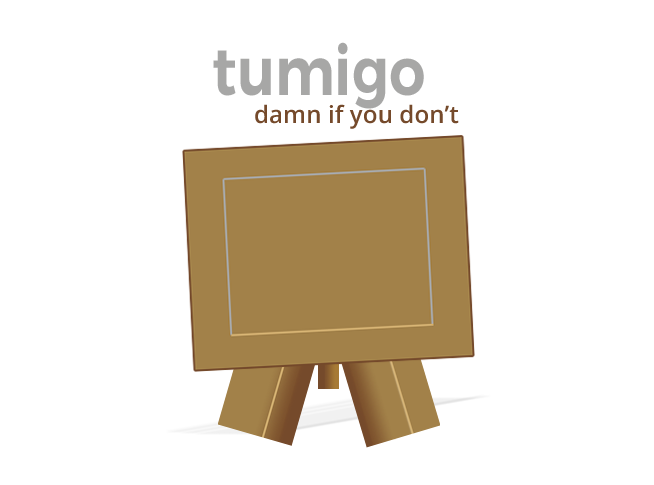
<style>
.page{position:relative;width:654px;height:485px;background:#ffffff}
.page>*{position:absolute;margin:0}
.t1{font:67.2px "Montserrat-SemiBold";color:#a7a7a6;scale:0.86 1}
.t2{font:24px "OpenSans-Semibold";letter-spacing:0.005em;color:#754a2b}
</style>
<div class="page">
<p class="t1" style="left:213px;top:42px;width:211px;height:67px">tumigo</p>
<p class="t2" style="left:255px;top:104px;width:204px;height:25px">damn if you don’t</p>
</div>
